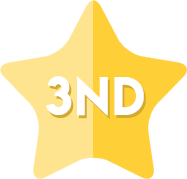
<style>
.page{position:relative;width:187px;height:179px;background:#ffffff}
.page>*{position:absolute;margin:0}
.t1{font:48.1px "LemonMilk";letter-spacing:0.05em;color:#ffffff}
</style>
<div class="page">
<p class="t1" style="left:46px;top:76px;width:98px;height:40px">3Nd</p>
<p class="t1" style="left:48px;top:79px;width:98px;height:40px">3nd</p>
</div>
